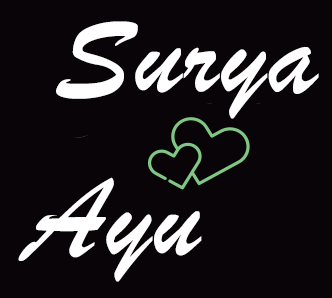
<style>
.page{position:relative;width:332px;height:298px;background:#090408}
.page>*{position:absolute;margin:0}
.t1{font:120px "BrushScriptMT";letter-spacing:0.02em;color:#ffffff}
</style>
<div class="page">
<p class="t1" style="left:56px;top:21px;width:263px;height:98px">Surya</p>
<p class="t1" style="left:18px;top:177px;width:184px;height:105px">Ayu</p>
</div>
